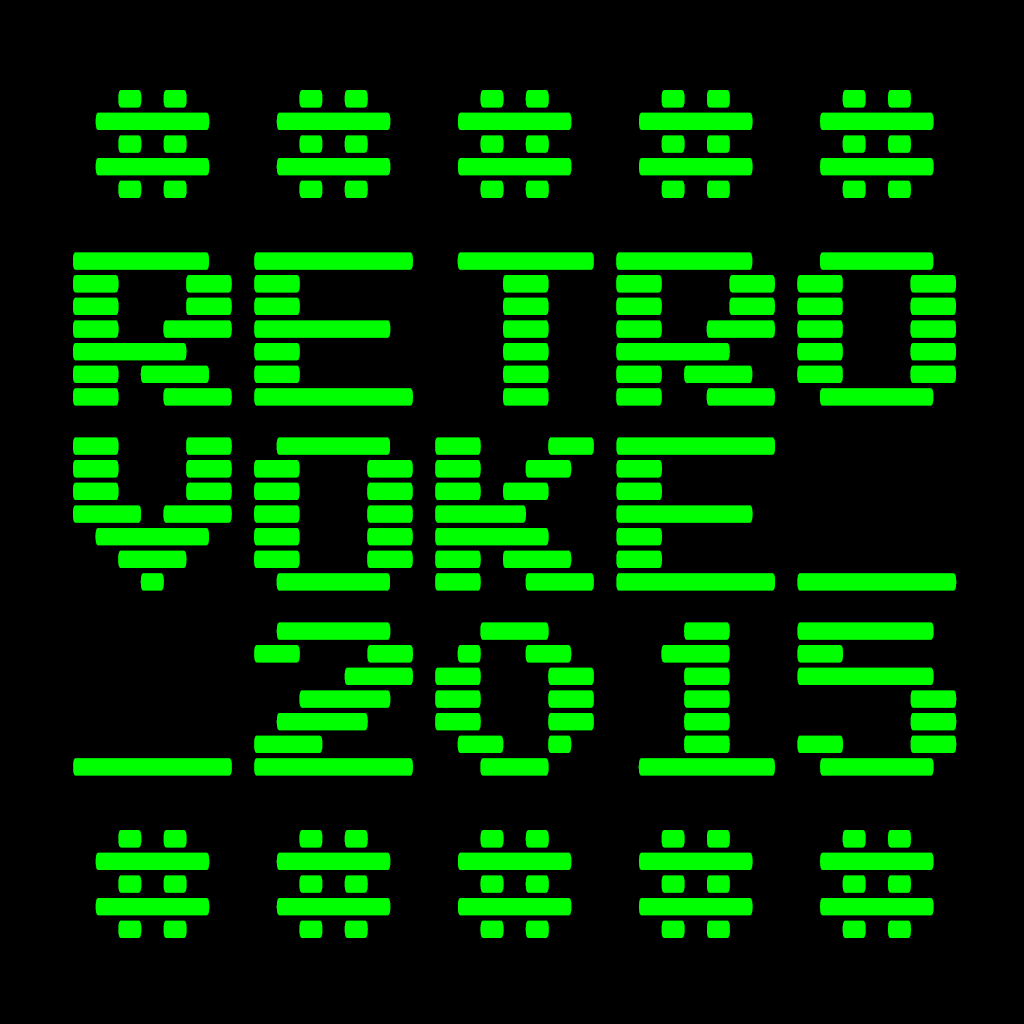
<style>
.page{position:relative;width:1024px;height:1024px;background:#000000}
.page>*{position:absolute;margin:0}
.t1{font:185px/185px "ArcadeInterlaced";color:#00ff00}
</style>
<div class="page">
<p class="t1" style="left:73px;top:90px;width:884px;height:848px;text-align:center">#####<br>RETRO<br>VOKE_<br>_2015<br>#####</p>
</div>
